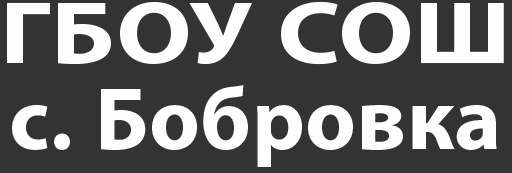
<style>
.page{position:relative;width:512px;height:173px;background:#333333}
.page>*{position:absolute;margin:0}
.t1{font:89px/86px "MyriadPro-Bold";letter-spacing:0.02em;color:#fefefe}
.t2{font:89px/86px "MyriadPro-Bold";letter-spacing:0.02em;color:#fefefe;scale:1.19 1}
</style>
<div class="page">
<p class="t1" style="left:7px;top:1px;width:497px;height:166px;text-align:center"><span class="t2">ГБОУ СОШ<br></span>с. Бобровка</p>
</div>
